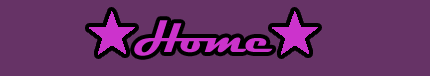
<style>
.page{position:relative;width:430px;height:76px;background:#663366}
.page>*{position:absolute;margin:0}
.t1{font:42.1px "Magneto-Bold";color:#cc33cc}
</style>
<div class="page">
<p class="t1" style="left:134px;top:20px;width:139px;height:36px">Home</p>
</div>
